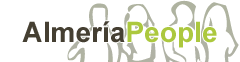
<style>
.page{position:relative;width:240px;height:62px;background:#ffffff}
.page>*{position:absolute;margin:0}
.t1{font:28.2px "Arial-BoldMT";color:#453f32}
.t2{font:28.2px "Arial-BoldMT";color:#acc83e}
</style>
<div class="page">
<p class="t1" style="left:22px;top:21px;width:195px;height:27px">Almería<span class="t2">People</span></p>
</div>
